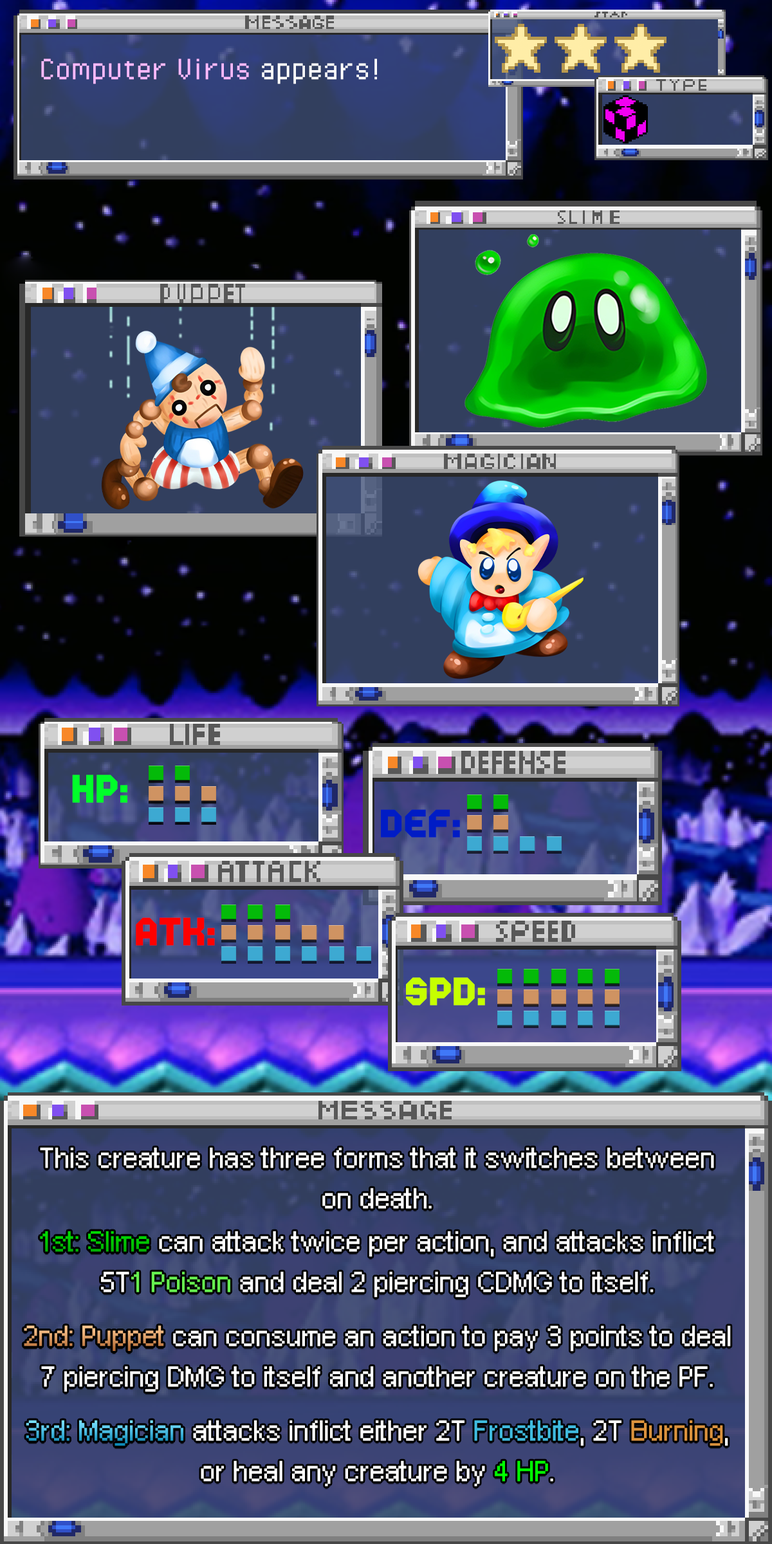
<style>
.page{position:relative;width:772px;height:1544px}
.page>*{position:absolute;margin:0}
.t1{font:61.8px "PixelOperator";color:#ffbaff}
.t2{font:61.8px "PixelOperator";color:#ffffff}
.t3{font:65.6px "World-Three";color:#00ff2a}
.t4{font:65.6px "World-Three";color:#001cc5}
.t5{font:65.6px "World-Three";color:#ff0000}
.t6{font:65.6px "World-Three";color:#c6ff00}
.t7{font:34.7px/40.5px "PixelArial11";color:#ffffff}
.t8{font:34.7px/43.1px "PixelArial11";color:#ffffff}
.t9{font:34.7px/40.5px "PixelArial11";color:#66f24f}
.t10{font:34.7px/54.1px "PixelArial11";color:#ffffff}
.t11{font:34.7px/40.5px "PixelArial11";color:#3fbbdf}
.t12{font:34.7px/40.5px "PixelArial11";color:#db923d}
.t13{font:34.7px/40.5px "PixelArial11";color:#00ff00}
.t14{font:34.7px "PixelArial11";color:#01c702}
.t15{font:34.7px "PixelArial11"}
</style>
<div class="page">
<p class="t1" style="left:41px;top:59px;width:336px;height:25px">Computer Virus <span class="t2">appears!</span></p>
<p class="t3" style="left:72px;top:775px;width:55px;height:28px">HP:</p>
<p class="t4" style="left:381px;top:809px;width:79px;height:29px">DEF:</p>
<p class="t5" style="left:136px;top:918px;width:79px;height:28px">ATK:</p>
<p class="t6" style="left:406px;top:977px;width:79px;height:29px">SPD:</p>
<p class="t7" style="left:24px;top:1147px;width:707px;height:340px;text-align:center">This creature has three forms that it switches between on death.<br><span class="t8">1st: Slime</span> can attack twice per action, and attacks inflict 5T<span class="t9">1 Poison</span> and deal 2 piercing CDMG to itself.<br><span class="t10">2nd: Puppet</span> can consume an action to pay 3 points to deal 7 piercing DMG to itself and another creature on the PF.<br><span class="t10">3rd: Magician</span> attacks inflict either 2T <span class="t11">Frostbite</span>, 2T <span class="t12">Burning</span>, or heal any creature by <span class="t13">4 HP</span>.</p>
<p class="t14" style="left:40px;top:1231px;width:109px;height:21px">1st: Slime</p>
<p class="t15" style="left:24px;top:1326px;width:140px;height:25px">2nd: Puppet</p>
<p class="t15" style="left:26px;top:1420px;width:157px;height:26px">3rd: Magician</p>
</div>
